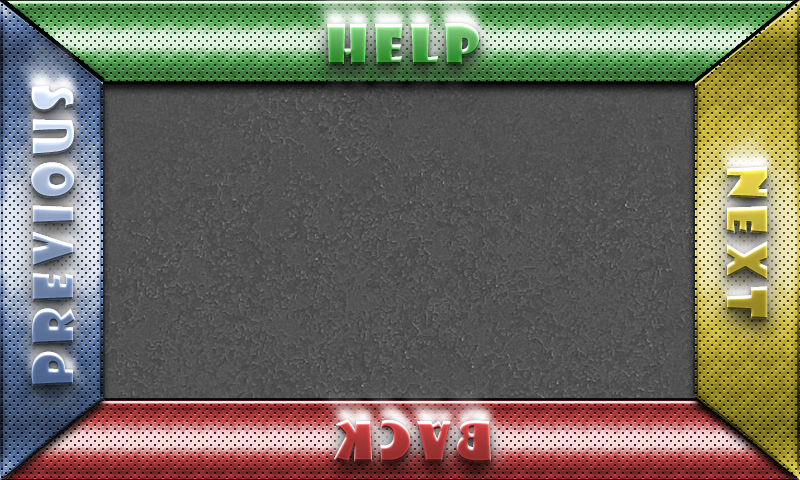
<style>
.page{position:relative;width:800px;height:480px}
.page>*{position:absolute;margin:0}
.t1{font:53.8px "ShowcardGothic-Reg";letter-spacing:0.11em}
</style>
<div class="page">
<p class="t1" style="left:31px;top:86px;width:45px;height:300px;rotate:-90deg">previous</p>
<p class="t1" style="left:31px;top:86px;width:45px;height:300px;rotate:-90deg">previous</p>
<p class="t1" style="left:31px;top:86px;width:45px;height:300px;rotate:-90deg">previous</p>
<p class="t1" style="left:31px;top:86px;width:45px;height:300px;rotate:-90deg">previous</p>
<p class="t1" style="left:726px;top:166px;width:42px;height:153px;rotate:90deg">next</p>
<p class="t1" style="left:726px;top:166px;width:42px;height:153px;rotate:90deg">next</p>
<p class="t1" style="left:726px;top:166px;width:42px;height:153px;rotate:90deg">next</p>
<p class="t1" style="left:726px;top:166px;width:42px;height:153px;rotate:90deg">next</p>
<p class="t1" style="left:333px;top:418px;width:158px;height:45px;rotate:180deg">back</p>
<p class="t1" style="left:333px;top:418px;width:158px;height:45px;rotate:180deg">back</p>
<p class="t1" style="left:333px;top:418px;width:158px;height:45px;rotate:180deg">back</p>
<p class="t1" style="left:333px;top:418px;width:158px;height:45px;rotate:180deg">back</p>
</div>
